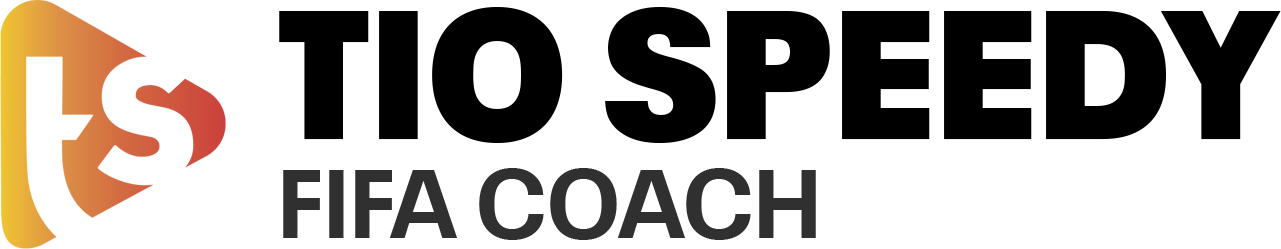
<style>
.page{position:relative;width:1281px;height:249px;background:#ffffff}
.page>*{position:absolute;margin:0}
.t1{font:180.6px "NeuePlak-ExtraBlack";letter-spacing:0.012em;color:#000000}
.t2{font:96.8px "NeuePlak-Bold";letter-spacing:0.012em;color:#303030}
</style>
<div class="page">
<p class="t1" style="left:279px;top:7px;width:1002px;height:136px">TIO SPEEDY</p>
<p class="t2" style="left:283px;top:168px;width:533px;height:72px">FIFA COACH</p>
</div>
